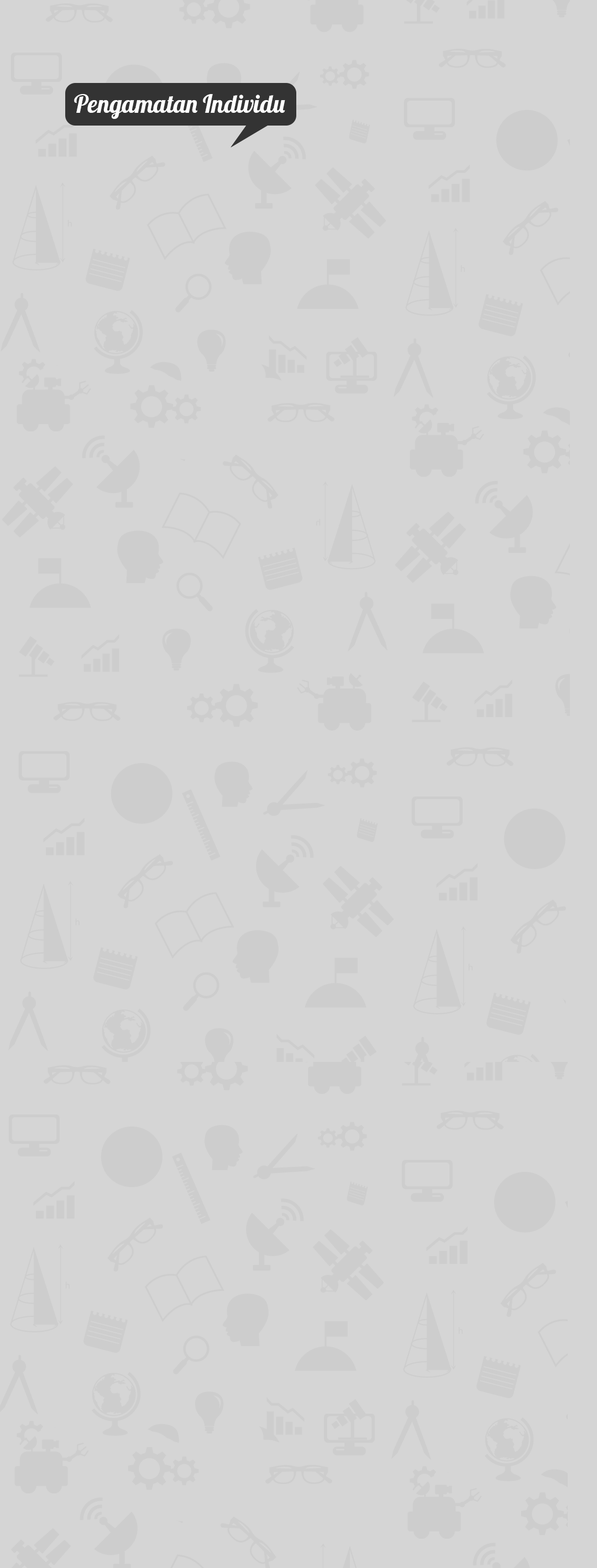
<style>
.page{position:relative;width:597px;height:1568px;background:#d5d5d5}
.page>*{position:absolute;margin:0}
.t1{font:24.6px "Lobster-Regular";color:#ffffff}
</style>
<div class="page">
<p class="t1" style="left:74px;top:94px;width:211px;height:25px">Pengamatan Individu</p>
</div>
